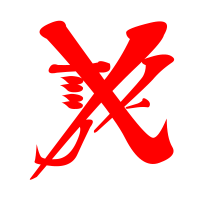
<style>
.page{position:relative;width:200px;height:200px;background:#ffffff}
.page>*{position:absolute;margin:0}
.t1{font:166.7px "KingthingsConundrum";color:#ff0000}
</style>
<div class="page">
<p class="t1" style="left:29px;top:20px;width:146px;height:160px">X</p>
</div>
